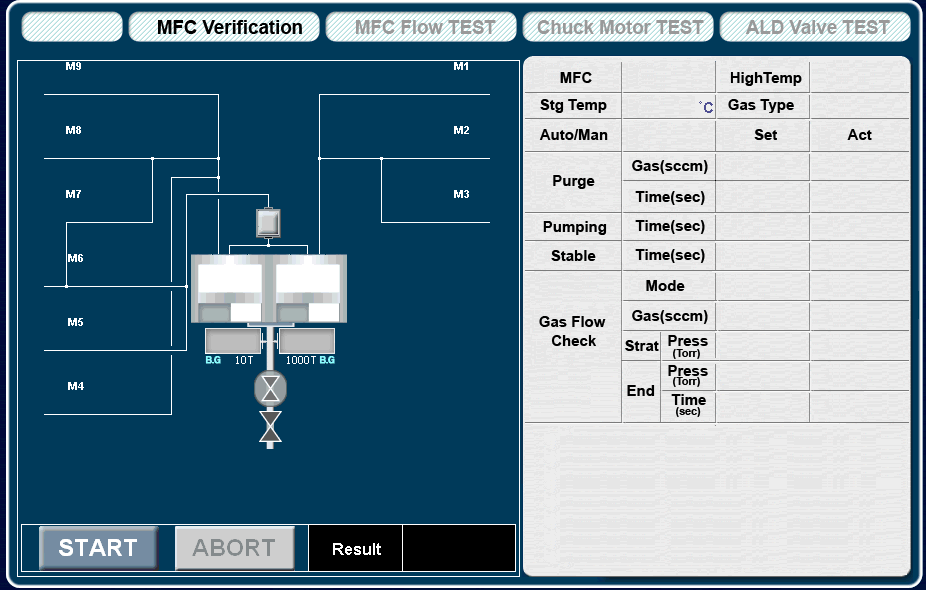
<style>
.page{position:relative;width:926px;height:590px;background:#003a5a}
.page>*{position:absolute;margin:0}
.t1{font:18.7px "Arial-BoldMT";color:#000000}
.t2{font:18.7px "Arial-BoldMT";color:#999999}
.t3{font:15px "Arial-BoldMT";color:#000000}
.t4{font:15px/18.7px "Arial-BoldMT";color:#000000}
.t5{font:10.7px "Arial-BoldMT";color:#000000}
</style>
<div class="page">
<p class="t1" style="left:158px;top:20px;width:144px;height:14px">MFC Verification</p>
<p class="t2" style="left:356px;top:20px;width:140px;height:14px">MFC Flow TEST</p>
<p class="t2" style="left:537px;top:20px;width:167px;height:14px">Chuck Motor TEST</p>
<p class="t2" style="left:745px;top:20px;width:145px;height:14px">ALD Valve TEST</p>
<p class="t3" style="left:560px;top:72px;width:242px;height:14px">MFC                                 HighTemp</p>
<p class="t3" style="left:540px;top:99px;width:254px;height:14px">Stg Temp                             Gas Type</p>
<p class="t3" style="left:539px;top:129px;width:333px;height:11px">Auto/Man                                   Set                 Act</p>
<p class="t3" style="left:632px;top:160px;width:76px;height:14px">Gas(sccm)</p>
<p class="t3" style="left:553px;top:175px;width:42px;height:14px">Purge</p>
<p class="t3" style="left:635px;top:191px;width:70px;height:14px">Time(sec)</p>
<p class="t3" style="left:543px;top:221px;width:64px;height:14px">Pumping</p>
<p class="t3" style="left:635px;top:220px;width:70px;height:14px">Time(sec)</p>
<p class="t3" style="left:551px;top:250px;width:45px;height:11px">Stable</p>
<p class="t3" style="left:635px;top:249px;width:70px;height:14px">Time(sec)</p>
<p class="t3" style="left:646px;top:280px;width:39px;height:11px">Mode</p>
<p class="t4" style="left:539px;top:316px;width:67px;height:30px">Gas Flow<br>   Check</p>
<p class="t3" style="left:632px;top:310px;width:76px;height:14px">Gas(sccm)</p>
<p class="t3" style="left:625px;top:340px;width:34px;height:11px">Strat</p>
<p class="t3" style="left:668px;top:335px;width:40px;height:11px">Press</p>
<p class="t5" style="left:673px;top:349px;width:27px;height:10px"><span class="t3">  </span>(Torr)</p>
<p class="t3" style="left:668px;top:365px;width:40px;height:11px">Press</p>
<p class="t5" style="left:673px;top:377px;width:27px;height:10px"><span class="t3">  </span>(Torr)</p>
<p class="t3" style="left:627px;top:385px;width:28px;height:11px">End</p>
<p class="t3" style="left:671px;top:394px;width:35px;height:11px">Time</p>
<p class="t5" style="left:676px;top:407px;width:25px;height:10px"><span class="t3">  </span>(sec)</p>
</div>
